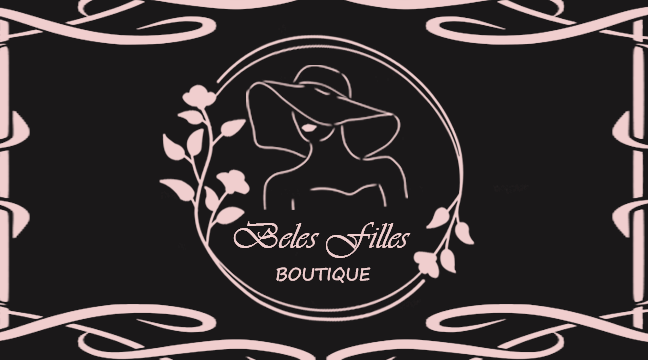
<style>
.page{position:relative;width:648px;height:360px;background:#1a1819}
.page>*{position:absolute;margin:0}
.t1{font:38.2px "Vivaldii";color:#f0cece}
.t2{font:17px "SegoePrint";color:#f0cece}
</style>
<div class="page">
<p class="t1" style="left:233px;top:221px;width:178px;height:37px">Beles Filles</p>
<p class="t1" style="left:233px;top:221px;width:178px;height:37px">Beles Filles</p>
<p class="t2" style="left:276px;top:267px;width:95px;height:16px">BOUTIQUE</p>
<p class="t2" style="left:276px;top:267px;width:95px;height:16px">BOUTIQUE</p>
</div>
